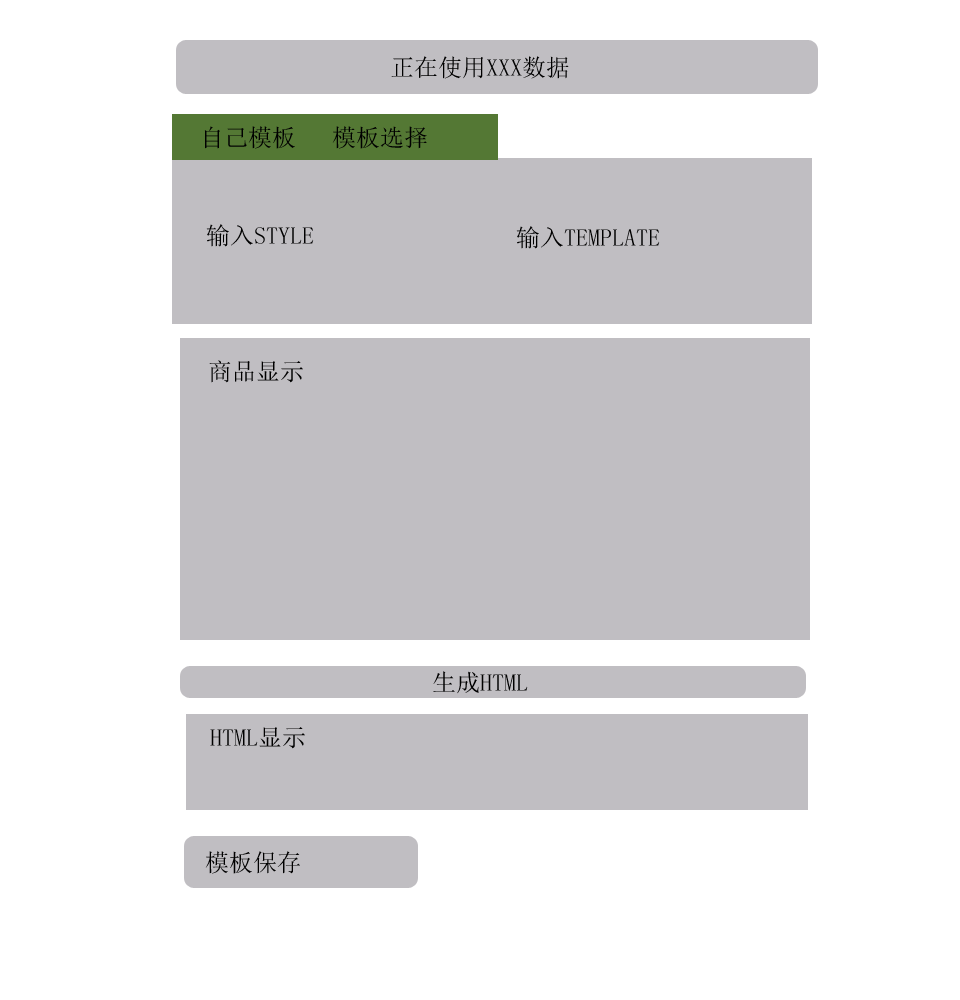
<style>
.page{position:relative;width:960px;height:1000px;background:#ffffff}
.page>*{position:absolute;margin:0}
.t1{font:24px "SimSun";color:#000000}
</style>
<div class="page">
<p class="t1" style="left:391px;top:56px;width:178px;height:23px">正在使用XXX数据</p>
<p class="t1" style="left:204px;top:126px;width:223px;height:23px">自己模板   模板选择</p>
<p class="t1" style="left:206px;top:224px;width:108px;height:23px">输入STYLE</p>
<p class="t1" style="left:516px;top:226px;width:144px;height:23px">输入TEMPLATE</p>
<p class="t1" style="left:209px;top:360px;width:94px;height:23px">商品显示</p>
<p class="t1" style="left:433px;top:671px;width:95px;height:23px">生成HTML</p>
<p class="t1" style="left:210px;top:727px;width:95px;height:22px">HTML显示</p>
<p class="t1" style="left:205px;top:851px;width:95px;height:23px">模板保存</p>
</div>
